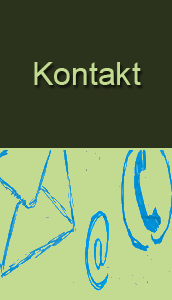
<style>
.page{position:relative;width:172px;height:300px;background:#2c331d}
.page>*{position:absolute;margin:0}
.t1{font:32.1px "ArialMT";color:#c2db91}
</style>
<div class="page">
<p class="t1" style="left:34px;top:62px;width:107px;height:23px">Kontakt</p>
</div>
